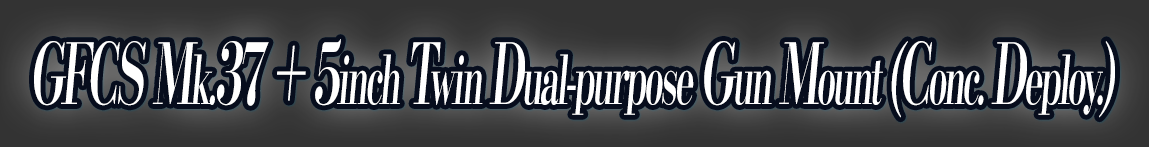
<style>
.page{position:relative;width:1149px;height:147px}
.page>*{position:absolute;margin:0}
.t1{font:67.2px "KochoStd-Heavy";letter-spacing:-0.08em;color:#ffffff;font-style:italic;scale:0.52 1}
.t2{font:84px "KochoStd-Heavy";letter-spacing:-0.08em;color:#ffffff;font-style:italic;scale:0.52 1}
</style>
<div class="page">
<p class="t1" style="left:34px;top:39px;width:1081px;height:79px"><span class="t2">GFCS M</span>k.<span class="t2">37 + 5</span>inch <span class="t2">T</span>win <span class="t2">D</span>ual-purpose <span class="t2">G</span>un <span class="t2">M</span>ount <span class="t2">(C</span>onc. <span class="t2">D</span>eploy.<span class="t2">)</span></p>
</div>
